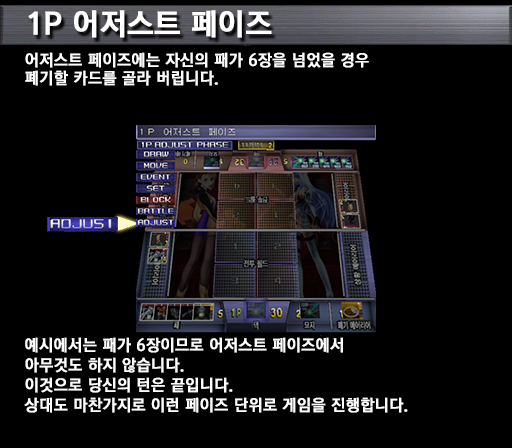
<style>
.page{position:relative;width:512px;height:448px;background:#000000}
.page>*{position:absolute;margin:0}
.t1{font:30px "KoreanGD15-R";color:#ffffff;font-weight:bold}
.t2{font:16px/18px "KoreanGD15-R";color:#ffffff;font-weight:bold}
.t3{font:16px/20px "KoreanGD15-R";color:#ffffff;font-weight:bold}
</style>
<div class="page">
<p class="t1" style="left:28px;top:10px;width:244px;height:28px">1P 어저스트 페이즈</p>
<p class="t2" style="left:25px;top:52px;width:344px;height:34px">어저스트 페이즈에는 자신의 패가 6장을 넘었을 경우<br>폐기할 카드를 골라 버립니다.</p>
<p class="t3" style="left:24px;top:337px;width:384px;height:76px">예시에서는 패가 6장이므로 어저스트 페이즈에서<br>아무것도 하지 않습니다.<br>이것으로 당신의 턴은 끝입니다.<br>상대도 마찬가지로 이런 페이즈 단위로 게임을 진행합니다.</p>
</div>
